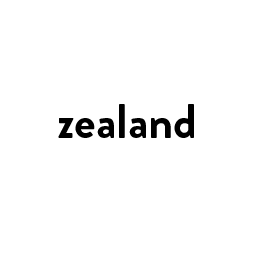
<style>
.page{position:relative;width:256px;height:256px;background:#ffffff}
.page>*{position:absolute;margin:0}
.t1{font:48px "BrandonGrotesque-Bold";color:#000000}
</style>
<div class="page">
<p class="t1" style="left:58px;top:104px;width:136px;height:34px">zealand</p>
</div>
